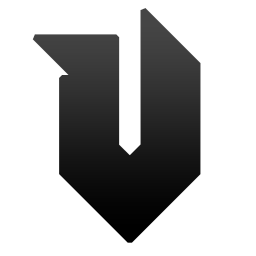
<style>
.page{position:relative;width:256px;height:256px;background:#ffffff}
.page>*{position:absolute;margin:0}
.t1{font:217px "Toe-the-Lineless";letter-spacing:0.12em;font-weight:bold}
</style>
<div class="page">
<p class="t1" style="left:32px;top:8px;width:169px;height:235px">V</p>
</div>
